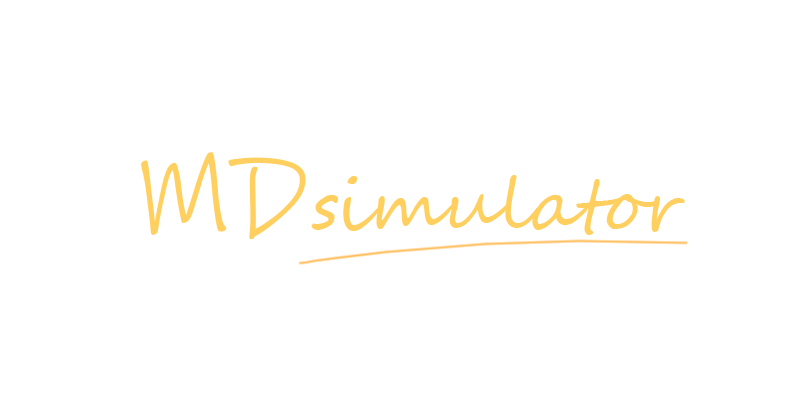
<style>
.page{position:relative;width:811px;height:420px;background:#ffffff}
.page>*{position:absolute;margin:0}
.t1{font:120px "InkFree";color:#ffd060}
.t2{font:72px "SegoeScript";color:#ffd060}
.t3{font:72px "MVBoli";color:#ffd060}
</style>
<div class="page">
<p class="t1" style="left:141px;top:152px;width:165px;height:88px">MD</p>
<p class="t2" style="left:311px;top:175px;width:374px;height:60px"><span class="t3">s</span>imulator</p>
</div>
